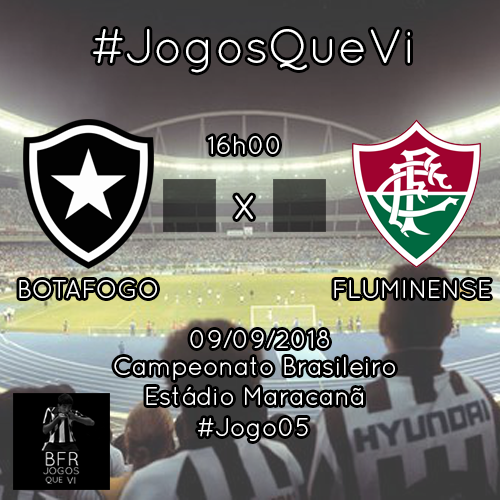
<style>
.page{position:relative;width:500px;height:500px}
.page>*{position:absolute;margin:0}
.t1{font:48px "QuicksandBook-Regular";color:#ffffff}
.t2{font:25px "QuicksandBook-Regular";color:#ffffff}
</style>
<div class="page">
<p class="t1" style="left:93px;top:29px;width:317px;height:44px">#JogosQueVi</p>
<p class="t2" style="left:208px;top:136px;width:71px;height:18px">16h00</p>
<p class="t1" style="left:235px;top:195px;width:18px;height:24px">x</p>
<p class="t2" style="left:19px;top:280px;width:138px;height:18px">BOTAFOGO</p>
<p class="t2" style="left:334px;top:280px;width:156px;height:18px">FLUMINENSE</p>
<p class="t2" style="left:190px;top:330px;width:139px;height:18px">09/09/2018</p>
<p class="t2" style="left:114px;top:357px;width:281px;height:23px">Campeonato Brasileiro</p>
<p class="t2" style="left:146px;top:387px;width:217px;height:18px">Estádio Maracanã</p>
<p class="t2" style="left:198px;top:418px;width:110px;height:23px">#Jogo05</p>
</div>
